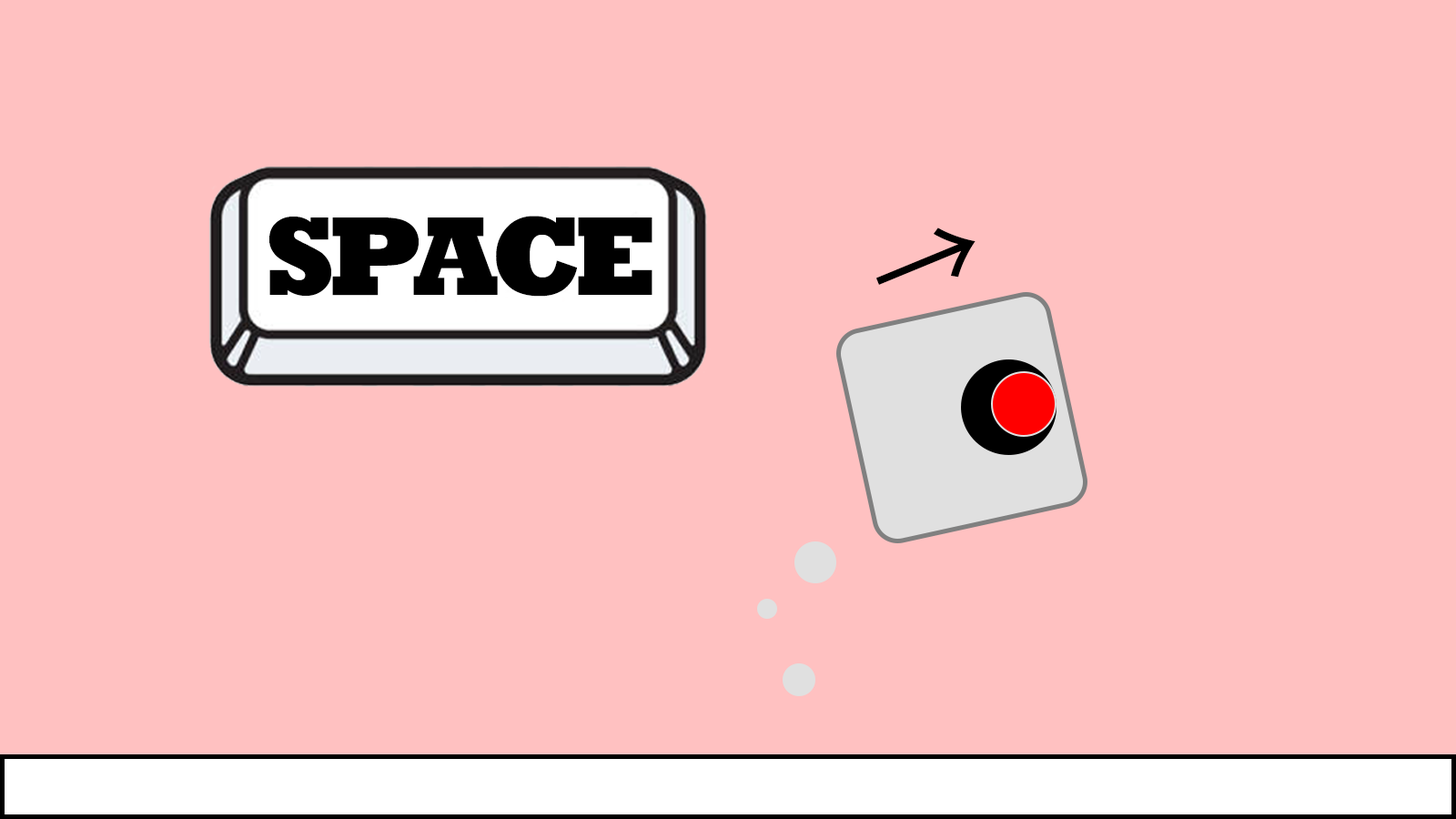
<style>
.page{position:relative;width:1456px;height:819px;background:#ffc1c1}
.page>*{position:absolute;margin:0}
.t1{font:113.7px "Rockwell-ExtraBold";letter-spacing:-0.075em;color:#000000}
.t2{font:113.7px "KozGoPr6N-Regular";letter-spacing:-0.075em;color:#000000}
</style>
<div class="page">
<p class="t1" style="left:269px;top:216px;width:383px;height:81px">SPACE</p>
<p class="t2" style="left:876px;top:227px;width:100px;height:58px;rotate:-22deg">→</p>
</div>
